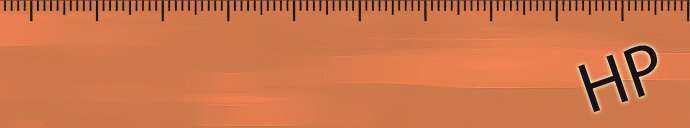
<style>
.page{position:relative;width:690px;height:128px}
.page>*{position:absolute;margin:0}
.t1{font:72px "MyriadPro-Regular";color:#181217}
</style>
<div class="page">
<p class="t1" style="left:578px;top:45px;width:79px;height:68px;rotate:-19deg">HP</p>
</div>
